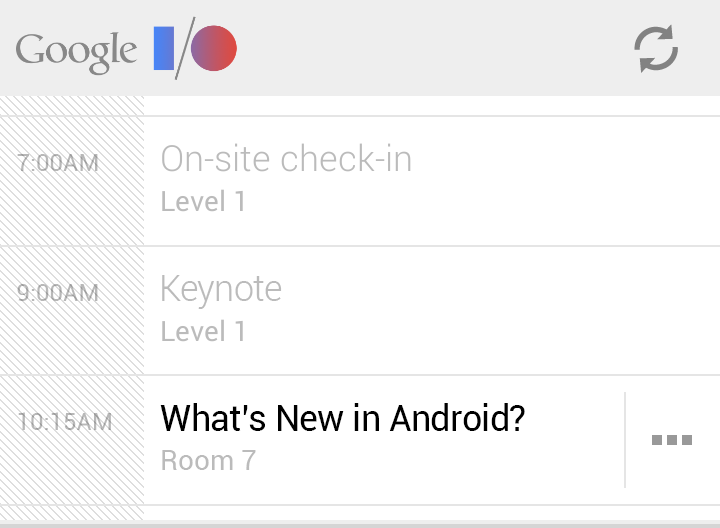
<style>
.page{position:relative;width:720px;height:528px;background:#ffffff}
.page>*{position:absolute;margin:0}
.t1{font:24px "Roboto-Regular";color:#b8b8b8}
.t2{font:36px "Roboto-Light";letter-spacing:-0.02em;color:#bbbbbb}
.t3{font:36px "Roboto-Regular";letter-spacing:-0.02em;color:#000000}
.t4{font:28px "Roboto-Regular";color:#bbbbbb}
</style>
<div class="page">
<p class="t1" style="left:17px;top:154px;width:81px;height:17px">7:00AM</p>
<p class="t2" style="left:162px;top:275px;width:120px;height:34px">Keynote</p>
<p class="t1" style="left:17px;top:284px;width:81px;height:17px">9:00AM</p>
<p class="t1" style="left:18px;top:412px;width:93px;height:18px">10:15AM</p>
<p class="t3" style="left:160px;top:403px;width:365px;height:28px">What’s New in Android?</p>
<p class="t4" style="left:162px;top:450px;width:94px;height:20px">Room 7</p>
</div>
